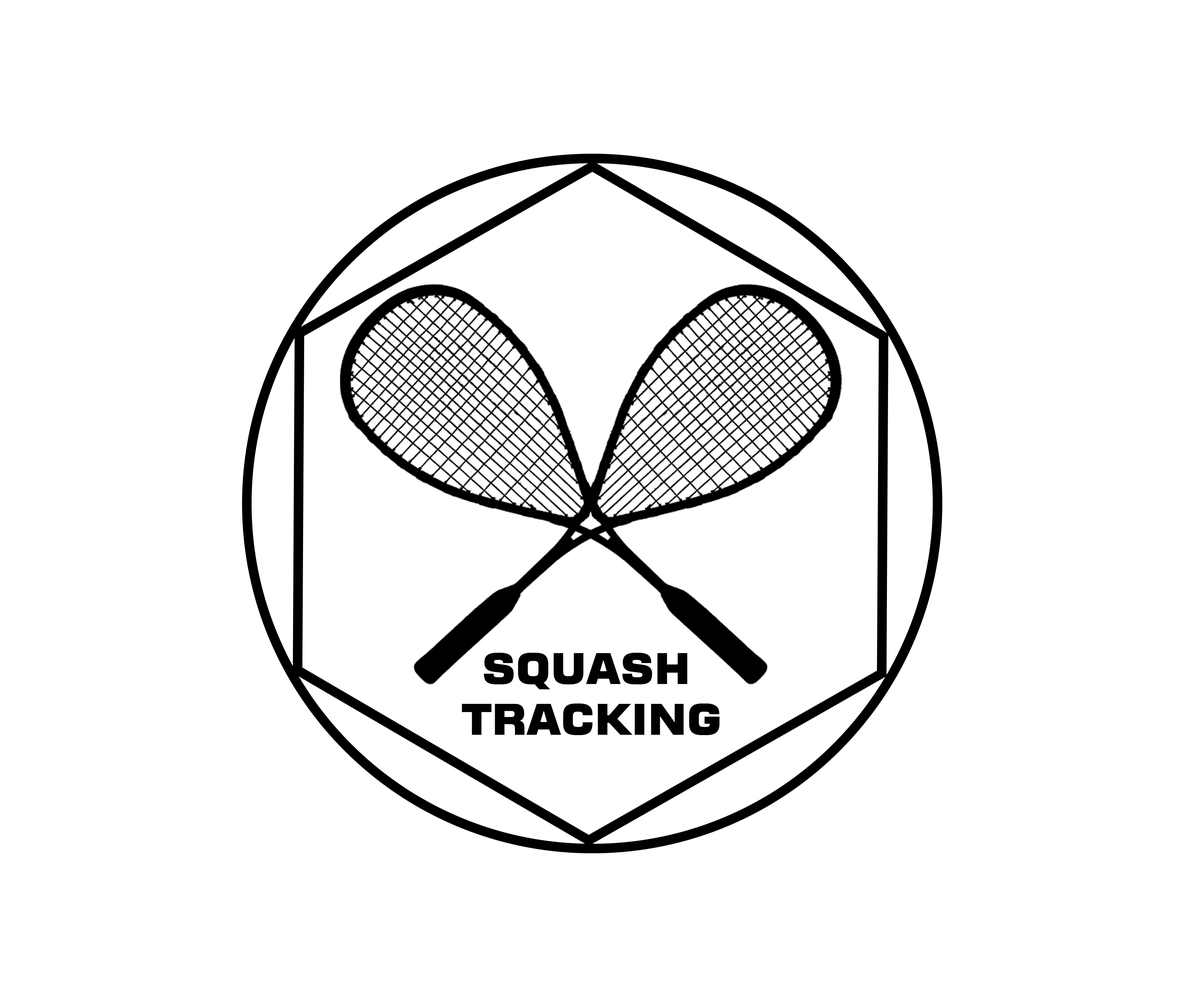
<style>
.page{position:relative;width:1184px;height:1007px;background:#ffffff}
.page>*{position:absolute;margin:0}
.t1{font:42.1px "Moire-ExtraBold";color:#030000}
</style>
<div class="page">
<p class="t1" style="left:462px;top:653px;width:258px;height:82px;text-align:center">SQUASH <br>TRACKING</p>
</div>
